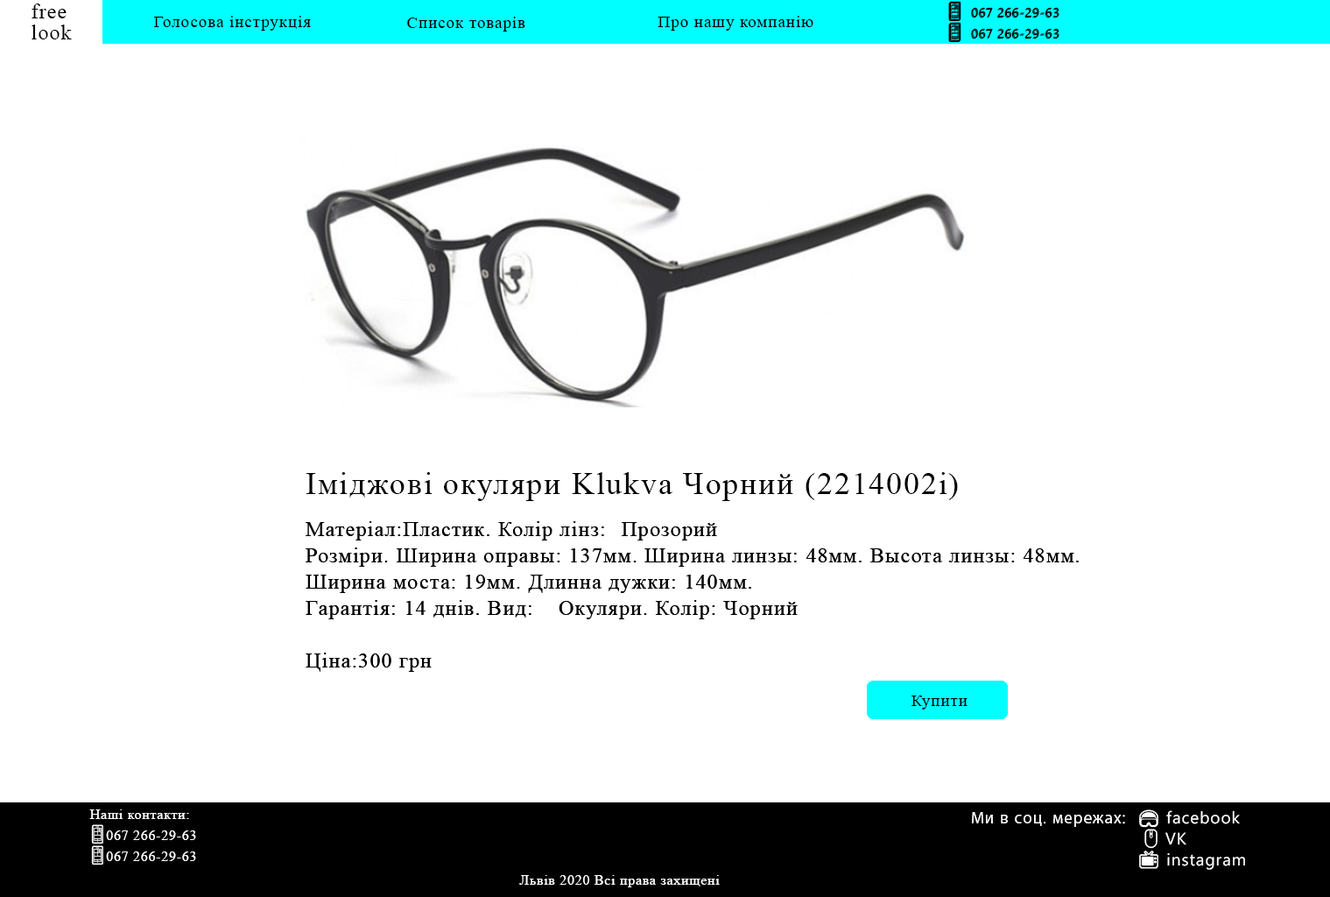
<style>
.page{position:relative;width:1330px;height:897px;background:#ffffff}
.page>*{position:absolute;margin:0}
.t1{font:20.8px/20.8px "TimesNewRomanPSMT";letter-spacing:0.05em;color:#000000}
.t2{font:16.6px "TimesNewRomanPSMT";letter-spacing:0.05em;color:#000000}
.t3{font:31.5px "TimesNewRomanPSMT";letter-spacing:0.05em;color:#000000}
.t4{font:21px/26.3px "TimesNewRomanPSMT";letter-spacing:0.05em;color:#000000}
.t5{font:13.9px/20.8px "TimesNewRomanPSMT";letter-spacing:0.05em;color:#ffffff}
.t6{font:16.6px/20.8px "SegoeUIEmoji";letter-spacing:0.05em;color:#ffffff}
.t7{font:13.9px "TimesNewRomanPSMT";letter-spacing:0.05em;color:#ffffff}
</style>
<div class="page">
<p class="t1" style="left:32px;top:4px;width:40px;height:35px">free<br>look</p>
<p class="t2" style="left:154px;top:16px;width:157px;height:15px">Голосова інструкція</p>
<p class="t2" style="left:407px;top:17px;width:118px;height:15px">Список товарів</p>
<p class="t2" style="left:658px;top:16px;width:155px;height:15px">Про нашу компанію</p>
<p class="t3" style="left:306px;top:472px;width:652px;height:29px">Іміджові окуляри Klukva Чорний (2214002i)</p>
<p class="t4" style="left:306px;top:521px;width:773px;height:151px">Матеріал:Пластик. Колір лінз: Прозорий<br>Розміри. Ширина оправы: 137мм. Ширина линзы: 48мм. Высота линзы: 48мм.<br>Ширина моста: 19мм. Длинна дужки: 140мм.<br>Гарантія: 14 днів. Вид:  Окуляри. Колір: Чорний<br><br>Ціна:300 грн</p>
<p class="t4" style="left:306px;top:521px;width:773px;height:151px">Матеріал:Пластик. Колір лінз: Прозорий<br>Розміри. Ширина оправы: 137мм. Ширина линзы: 48мм. Высота линзы: 48мм.<br>Ширина моста: 19мм. Длинна дужки: 140мм.<br>Гарантія: 14 днів. Вид:  Окуляри. Колір: Чорний<br><br>Ціна:300 грн</p>
<p class="t2" style="left:911px;top:695px;width:56px;height:14px">Купити</p>
<p class="t2" style="left:911px;top:695px;width:56px;height:14px">Купити</p>
<p class="t5" style="left:89px;top:809px;width:107px;height:56px">Наші контакти:<br><span class="t6">📱</span>067 266-29-63<br><span class="t6">📱</span>067 266-29-63</p>
<p class="t7" style="left:519px;top:875px;width:201px;height:12px">Львів 2020 Всі права захищені</p>
</div>
